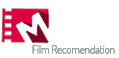
<style>
.page{position:relative;width:119px;height:58px;background:#ffffff}
.page>*{position:absolute;margin:0}
.t1{font:10.9px "Dosis-Regular";color:#999999}
</style>
<div class="page">
<p class="t1" style="left:32px;top:45px;width:83px;height:9px">Film Recomendation</p>
<p class="t1" style="left:32px;top:45px;width:83px;height:9px">Film Recomendation</p>
<p class="t1" style="left:32px;top:45px;width:83px;height:9px">Film Recomendation</p>
</div>
